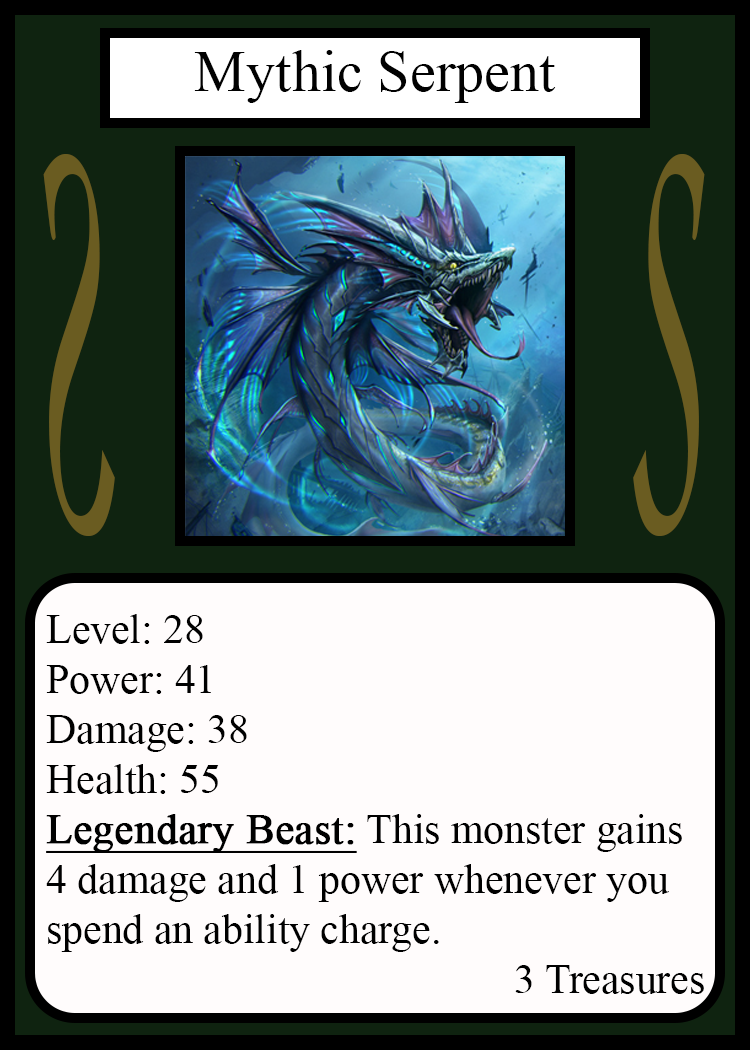
<style>
.page{position:relative;width:750px;height:1050px;background:#fffcfc}
.page>*{position:absolute;margin:0}
.t1{font:58.3px "TimesNewRomanPSMT";color:#010101}
.t2{font:548.5px "Apple-Chancery";color:#6a5c21;scale:0.27 1}
.t3{font:548.2px "Apple-Chancery";color:#6a5c21;scale:0.27 1}
.t4{font:41.7px "TimesNewRomanPSMT";color:#000000}
.t5{font:41.7px "TimesNewRomanPSMT";color:#000000;font-weight:bold;text-decoration:underline}
</style>
<div class="page">
<p class="t1" style="left:194px;top:50px;width:362px;height:53px">Mythic Serpent</p>
<p class="t2" style="left:43px;top:154px;width:72px;height:382px;rotate:180deg">S</p>
<p class="t3" style="left:633px;top:154px;width:72px;height:382px">S</p>
<p class="t4" style="left:46px;top:614px;width:658px;height:380px">Level: 28<br>Power: 41<br>Damage: 38<br>Health: 55<br><span class="t5">Legendary Beast:</span> This monster gains<br>4 damage and 1 power whenever you <br>spend an ability charge.<br>             3 Treasures</p>
</div>
